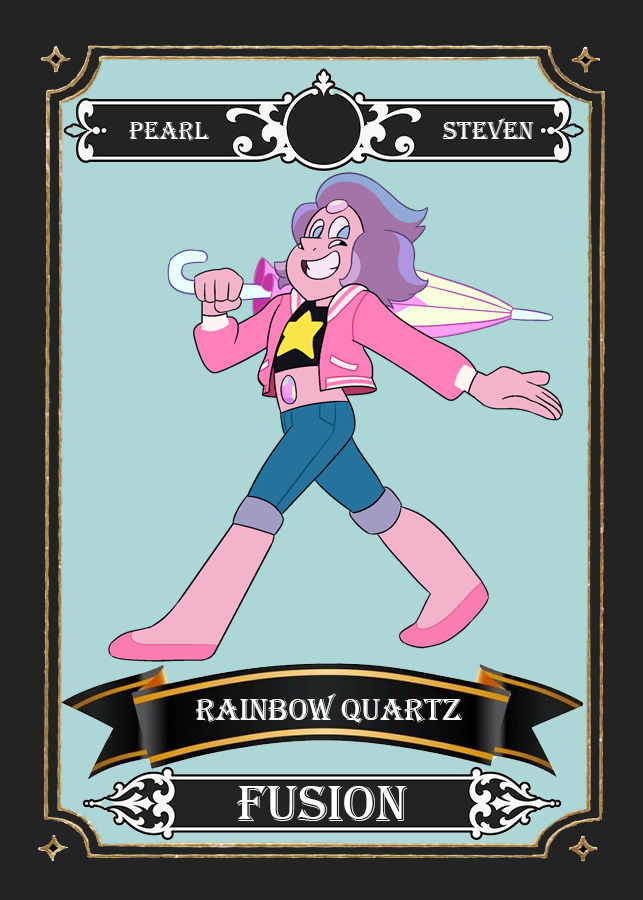
<style>
.page{position:relative;width:643px;height:900px;background:#add7d6}
.page>*{position:absolute;margin:0}
.t1{font:25.2px "Algerian";color:#ffffff}
.t2{font:31.5px "Algerian";color:#ffffff}
.t3{font:52.6px "Algerian";color:#ffffff}
</style>
<div class="page">
<p class="t1" style="left:442px;top:118px;width:92px;height:21px">steven</p>
<p class="t2" style="left:196px;top:693px;width:266px;height:30px">rainbow quartz</p>
<p class="t3" style="left:237px;top:786px;width:171px;height:35px">Fusion</p>
</div>
